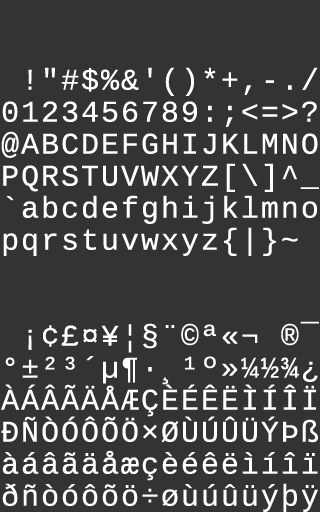
<style>
.page{position:relative;width:320px;height:512px;background:#333333}
.page>*{position:absolute;margin:0}
.t1{font:30px/32px "LiberationMono";letter-spacing:0.066em;color:#fefefe}
</style>
<div class="page">
<p class="t1" style="left:1px;top:67px;width:318px;height:445px">!"#$%&amp;'()*+,-./<br>0123456789:;&lt;=&gt;?<br>@ABCDEFGHIJKLMNO<br>PQRSTUVWXYZ[\]^_<br>`abcdefghijklmno<br>pqrstuvwxyz{|}~<br><br><br> ¡¢£¤¥¦§¨©ª«¬ ®¯<br>°±²³´µ¶·¸¹º»¼½¾¿<br>ÀÁÂÃÄÅÆÇÈÉÊËÌÍÎÏ<br>ÐÑÒÓÔÕÖ×ØÙÚÛÜÝÞß<br>àáâãäåæçèéêëìíîï<br>ðñòóôõö÷øùúûüýþÿ</p>
</div>
